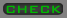
<style>
.page{position:relative;width:67px;height:18px;background:#828181}
.page>*{position:absolute;margin:0}
.t1{font:14px "BankGothicBT-Medium";color:#00b800}
</style>
<div class="page">
<p class="t1" style="left:6px;top:5px;width:55px;height:8px">CHECK</p>
</div>
